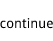
<style>
.page{position:relative;width:53px;height:41px;background:#ffffff}
.page>*{position:absolute;margin:0}
.t1{font:13.4px "DroidSans";color:#000000}
</style>
<div class="page">
<p class="t1" style="left:0px;top:18px;width:53px;height:11px">continue</p>
</div>
